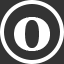
<style>
.page{position:relative;width:64px;height:64px;background:#333333}
.page>*{position:absolute;margin:0}
.t1{font:60px "Georgia-Bold";color:#ffffff}
</style>
<div class="page">
<p class="t1" style="left:14px;top:17px;width:36px;height:34px">0</p>
</div>
